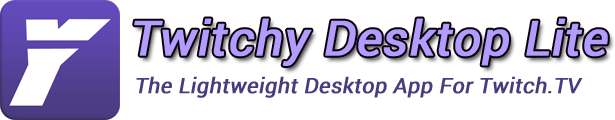
<style>
.page{position:relative;width:615px;height:120px;background:#ffffff}
.page>*{position:absolute;margin:0}
.t1{font:48px "Roboto-Regular";color:#b29cff;font-weight:bold;font-style:italic}
.t2{font:21.3px "Roboto-Regular";color:#493b7f;font-weight:bold;font-style:italic}
</style>
<div class="page">
<p class="t1" style="left:134px;top:18px;width:474px;height:48px">Twitchy Desktop Lite</p>
<p class="t2" style="left:136px;top:76px;width:447px;height:22px">The Lightweight Desktop App For Twitch.TV</p>
</div>
